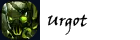
<style>
.page{position:relative;width:140px;height:40px;background:#ffffff}
.page>*{position:absolute;margin:0}
.t1{font:16px "VinerHandITC";color:#000000}
</style>
<div class="page">
<p class="t1" style="left:48px;top:14px;width:40px;height:21px">Urgot</p>
</div>
